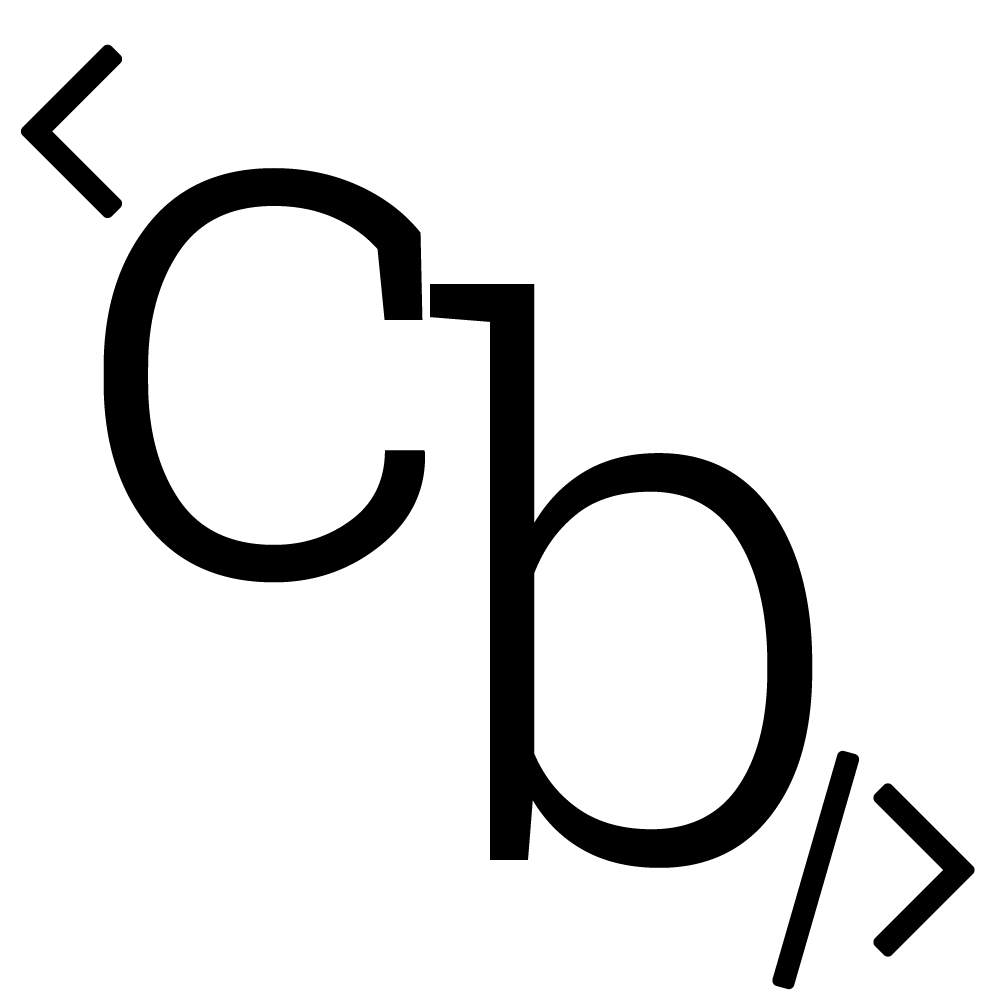
<style>
.page{position:relative;width:1000px;height:1000px;background:#ffffff}
.page>*{position:absolute;margin:0}
.t1{font:755px "RobotoSlab-Light";letter-spacing:0.01em;color:#000000}
.t2{font:755.5px "RobotoSlab-Light";letter-spacing:0.01em;color:#000000}
</style>
<div class="page">
<p class="t1" style="left:103px;top:168px;width:322px;height:415px">c</p>
<p class="t2" style="left:430px;top:284px;width:383px;height:584px">b</p>
</div>
